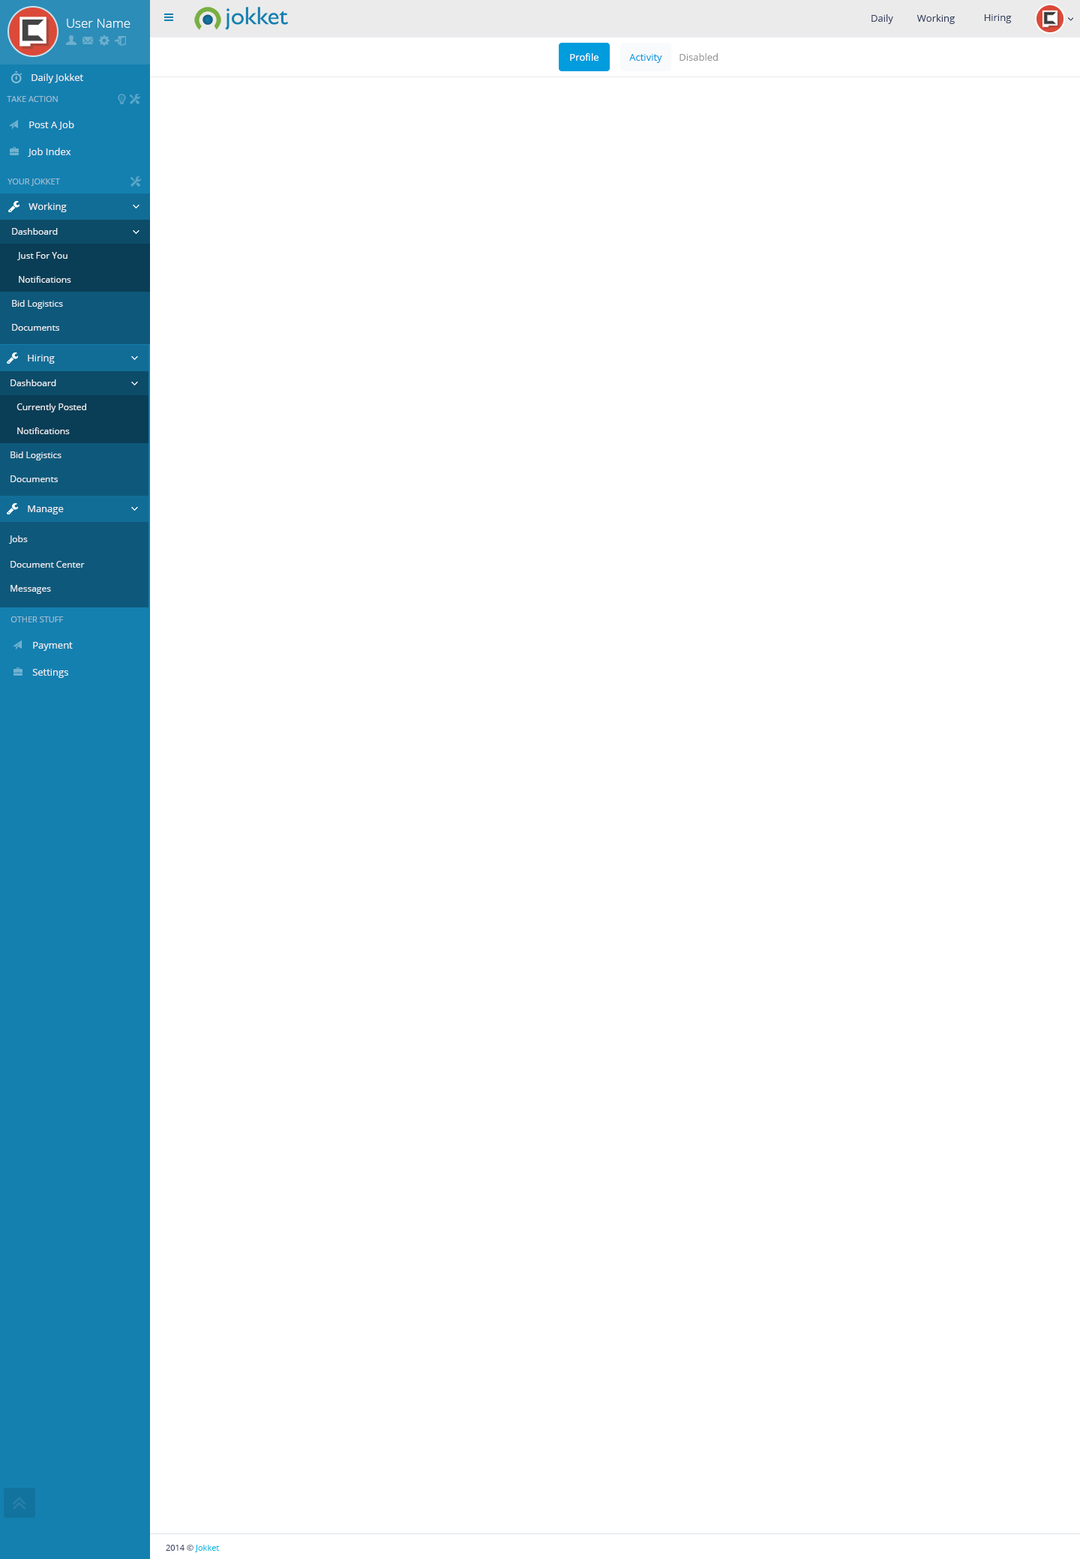
<style>
.page{position:relative;width:1080px;height:1559px;background:#ffffff}
.page>*{position:absolute;margin:0}
.t1{font:9.8px "OpenSans";color:#394263}
.t2{font:12.8px "OpenSans-Light";color:#ffffff}
.t3{font:9.8px "OpenSans";color:#ffffff}
.t4{font:9.8px "OpenSans";color:#009cde}
.t5{font:9.8px "OpenSans";color:#999999}
.t6{font:9.8px "OpenSans";color:#eaedf1}
.t7{font:8.2px "OpenSans";color:#99bcd2}
.t8{font:9px "OpenSans";color:#eaedf1}
.t9{font:8.2px "OpenSans";color:#394263}
.t10{font:8.2px "OpenSans";color:#0dbae1}
</style>
<div class="page">
<p class="t1" style="left:872px;top:14px;width:21px;height:10px">Daily</p>
<p class="t1" style="left:916px;top:14px;width:39px;height:10px">Working</p>
<p class="t1" style="left:984px;top:14px;width:28px;height:9px">Hiring</p>
<p class="t2" style="left:67px;top:19px;width:63px;height:9px">User Name</p>
<p class="t3" style="left:570px;top:53px;width:28px;height:8px">Profile</p>
<p class="t4" style="left:629px;top:54px;width:33px;height:9px">Activity</p>
<p class="t5" style="left:680px;top:53px;width:38px;height:8px">Disabled</p>
<p class="t6" style="left:32px;top:74px;width:51px;height:9px">Daily Jokket</p>
<p class="t7" style="left:7px;top:96px;width:51px;height:6px">TAKE ACTION</p>
<p class="t6" style="left:29px;top:121px;width:45px;height:9px">Post A Job</p>
<p class="t6" style="left:28px;top:148px;width:43px;height:9px">Job Index</p>
<p class="t7" style="left:8px;top:178px;width:52px;height:8px">YOUR JOKKET</p>
<p class="t6" style="left:28px;top:202px;width:39px;height:10px">Working</p>
<p class="t8" style="left:12px;top:228px;width:46px;height:7px">Dashboard</p>
<p class="t8" style="left:17px;top:252px;width:51px;height:8px">Just For You</p>
<p class="t8" style="left:19px;top:276px;width:52px;height:7px">Notifications</p>
<p class="t8" style="left:12px;top:300px;width:51px;height:9px">Bid Logistics</p>
<p class="t8" style="left:12px;top:324px;width:47px;height:7px">Documents</p>
<p class="t6" style="left:28px;top:355px;width:27px;height:9px">Hiring</p>
<p class="t8" style="left:10px;top:380px;width:46px;height:6px">Dashboard</p>
<p class="t8" style="left:16px;top:404px;width:70px;height:8px">Currently Posted</p>
<p class="t8" style="left:17px;top:428px;width:53px;height:6px">Notifications</p>
<p class="t8" style="left:10px;top:452px;width:52px;height:8px">Bid Logistics</p>
<p class="t8" style="left:10px;top:476px;width:48px;height:6px">Documents</p>
<p class="t6" style="left:28px;top:506px;width:36px;height:8px">Manage</p>
<p class="t8" style="left:9px;top:536px;width:19px;height:8px">Jobs</p>
<p class="t8" style="left:10px;top:561px;width:75px;height:7px">Document Center</p>
<p class="t8" style="left:10px;top:585px;width:41px;height:9px">Messages</p>
<p class="t7" style="left:10px;top:616px;width:54px;height:6px">OTHER STUFF</p>
<p class="t6" style="left:33px;top:642px;width:40px;height:9px">Payment</p>
<p class="t6" style="left:32px;top:669px;width:36px;height:9px">Settings</p>
<p class="t9" style="left:166px;top:1545px;width:53px;height:7px">2014 © <span class="t10">Jokket</span></p>
</div>
